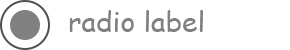
<style>
.page{position:relative;width:290px;height:50px;background:#ffffff}
.page>*{position:absolute;margin:0}
.t1{font:28px "ComicSansMS";color:#808080}
</style>
<div class="page">
<p class="t1" style="left:69px;top:10px;width:134px;height:22px">radio label</p>
</div>
